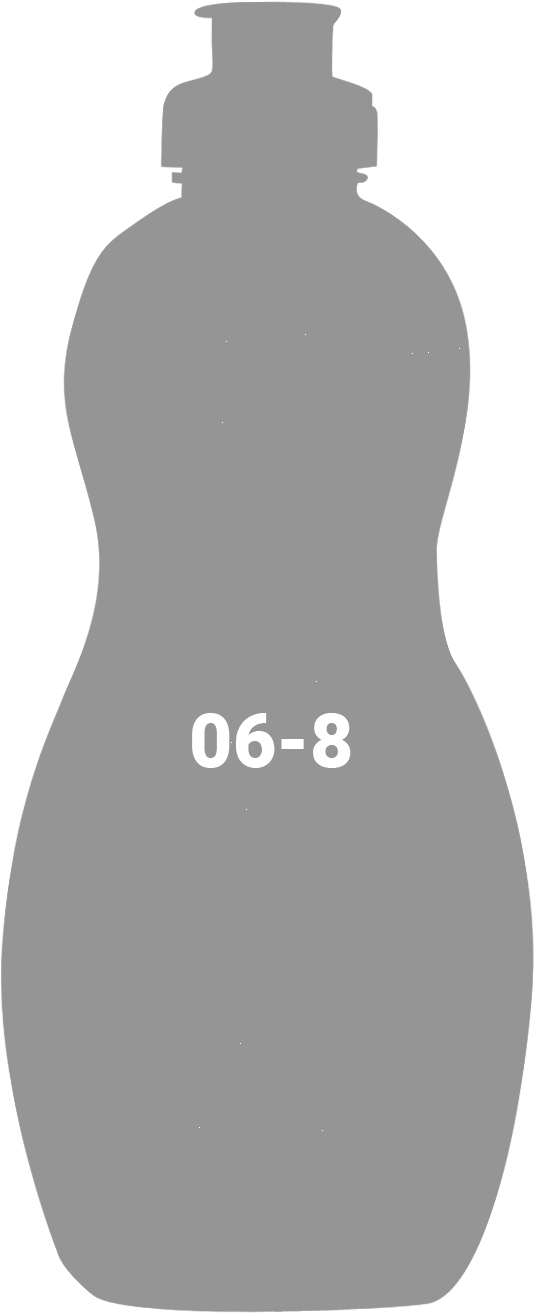
<style>
.page{position:relative;width:534px;height:1313px;background:#959595}
.page>*{position:absolute;margin:0}
.t1{font:75px "Roboto-Black";color:#ffffff}
</style>
<div class="page">
<p class="t1" style="left:192px;top:713px;width:159px;height:55px">06-8</p>
</div>
